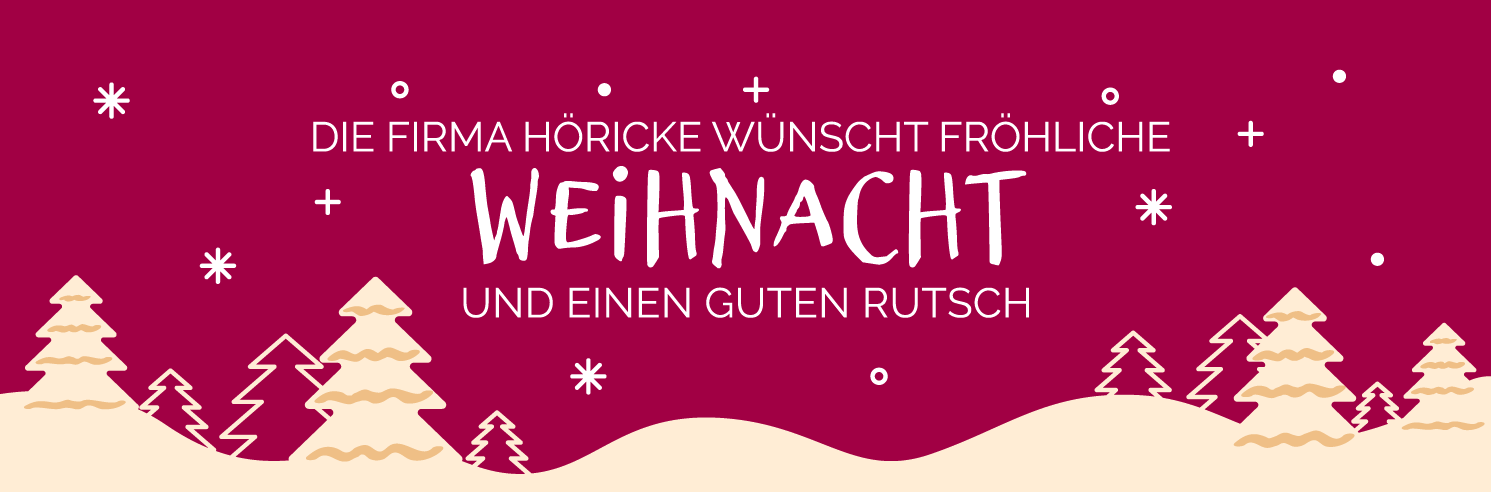
<style>
.page{position:relative;width:1491px;height:492px;background:#a10044}
.page>*{position:absolute;margin:0}
.t1{font:41.7px "Raleway-Regular";color:#ffffff;text-transform:uppercase}
.t2{font:150px "Brizel";color:#ffffff;text-transform:uppercase}
.t3{font:41.7px "Raleway-Regular";letter-spacing:0.01em;color:#ffffff;text-transform:uppercase}
</style>
<div class="page">
<p class="t1" style="left:313px;top:113px;width:857px;height:39px">Die Firma Höricke wünscht Fröhliche</p>
<p class="t2" style="left:470px;top:166px;width:557px;height:103px">Weihnacht</p>
<p class="t3" style="left:463px;top:287px;width:566px;height:31px">UND EINEN GUTEN RUTSCH</p>
</div>
